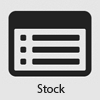
<style>
.page{position:relative;width:100px;height:100px;background:#e6e6e6}
.page>*{position:absolute;margin:0}
.t1{font:12px "MyriadPro-Regular";color:#222222}
</style>
<div class="page">
<p class="t1" style="left:37px;top:84px;width:28px;height:9px">Stock</p>
</div>
